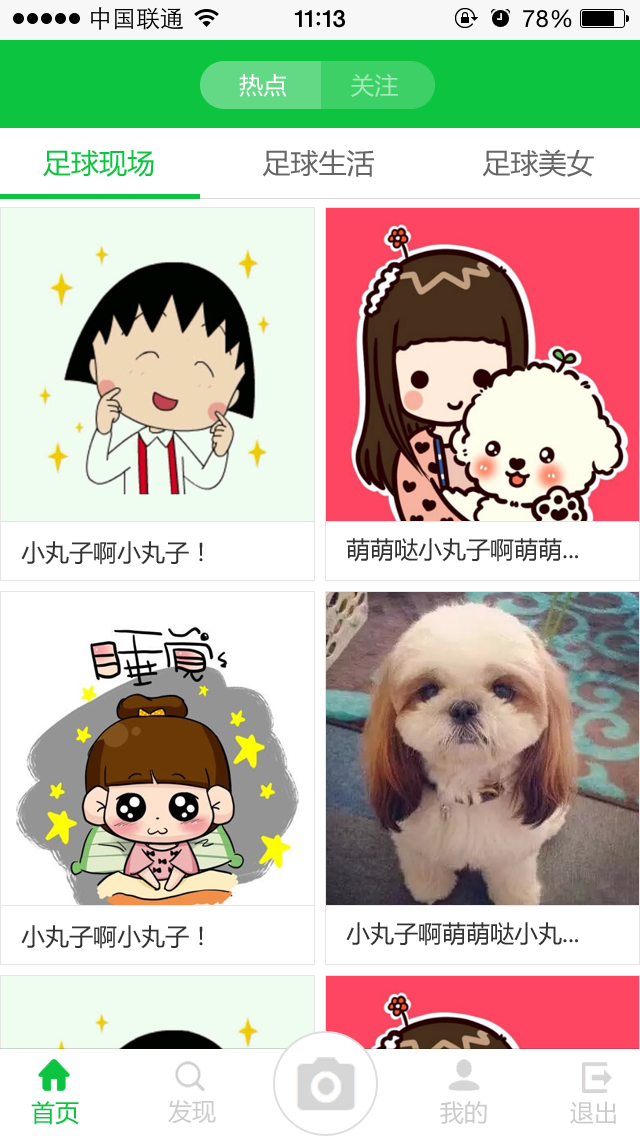
<style>
.page{position:relative;width:640px;height:1136px;background:#ffffff}
.page>*{position:absolute;margin:0}
.t1{font:24px "MicrosoftYaHei";color:#ffffff}
.t2{font:24px "MicrosoftYaHei";color:#a3e9b7}
.t3{font:28px "MicrosoftYaHei";color:#666666}
.t4{font:28px "MicrosoftYaHei";color:#0dc441}
.t5{font:24px "MicrosoftYaHei";color:#333333}
.t6{font:24px "MicrosoftYaHei";color:#0dc441}
.t7{font:24px "MicrosoftYaHei";color:#cccccc}
</style>
<div class="page">
<p class="t1" style="left:239px;top:73px;width:159px;height:24px">热点         <span class="t2">关注</span></p>
<p class="t3" style="left:43px;top:149px;width:551px;height:28px"><span class="t4">足球现场             </span>足球生活             足球美女</p>
<p class="t5" style="left:21px;top:541px;width:182px;height:24px">小丸子啊小丸子！</p>
<p class="t5" style="left:346px;top:538px;width:232px;height:24px">萌萌哒小丸子啊萌萌...</p>
<p class="t5" style="left:21px;top:925px;width:182px;height:24px">小丸子啊小丸子！</p>
<p class="t5" style="left:346px;top:922px;width:232px;height:24px">小丸子啊萌萌哒小丸...</p>
<p class="t6" style="left:31px;top:1101px;width:48px;height:24px">首页</p>
<p class="t7" style="left:168px;top:1100px;width:48px;height:24px">发现</p>
<p class="t7" style="left:440px;top:1101px;width:47px;height:23px">我的</p>
<p class="t7" style="left:570px;top:1101px;width:46px;height:23px">退出</p>
</div>
